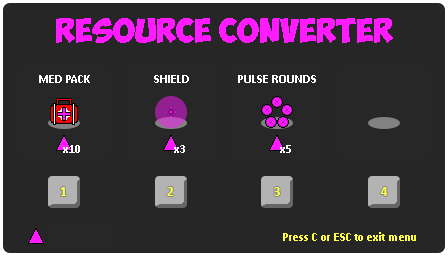
<style>
.page{position:relative;width:448px;height:256px;background:#262626}
.page>*{position:absolute;margin:0}
.t1{font:24px "ObelixPro-Bold";color:#ff1aff}
.t2{font:12px "Calibri-Bold";color:#ffffff}
.t3{font:14px "Calibri-Bold";color:#ffff40}
.t4{font:12px "Calibri-Bold";color:#ffff40}
</style>
<div class="page">
<p class="t1" style="left:56px;top:18px;width:337px;height:25px">RESOURCE CONVERTER</p>
<p class="t2" style="left:39px;top:75px;width:51px;height:8px">MED PACK</p>
<p class="t2" style="left:154px;top:75px;width:35px;height:8px">SHIELD</p>
<p class="t2" style="left:238px;top:75px;width:78px;height:8px">PULSE ROUNDS</p>
<p class="t2" style="left:63px;top:145px;width:17px;height:8px">x10</p>
<p class="t2" style="left:174px;top:145px;width:11px;height:8px">x3</p>
<p class="t2" style="left:280px;top:145px;width:11px;height:8px">x5</p>
<p class="t3" style="left:60px;top:187px;width:7px;height:9px">1</p>
<p class="t3" style="left:167px;top:187px;width:7px;height:9px">2</p>
<p class="t3" style="left:274px;top:187px;width:6px;height:9px">3</p>
<p class="t3" style="left:380px;top:187px;width:8px;height:9px">4</p>
<p class="t4" style="left:283px;top:232px;width:133px;height:9px">Press C or ESC to exit menu</p>
</div>
